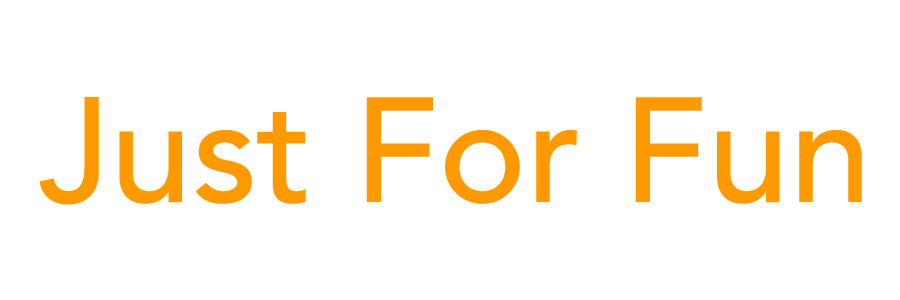
<style>
.page{position:relative;width:900px;height:300px;background:#ffffff}
.page>*{position:absolute;margin:0}
.t1{font:148px "Avenir-Medium";color:#ff9900}
</style>
<div class="page">
<p class="t1" style="left:39px;top:97px;width:823px;height:108px">Just For Fun</p>
</div>
